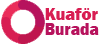
<style>
.page{position:relative;width:100px;height:44px;background:#ffffff}
.page>*{position:absolute;margin:0}
.t1{font:16.7px "FranklinGothic-Heavy";color:#d81d52}
.t2{font:16.7px "FranklinGothic-Heavy";color:#b7135d;scale:0.96 1}
</style>
<div class="page">
<p class="t1" style="left:45px;top:8px;width:53px;height:12px">Kuaför</p>
<p class="t2" style="left:45px;top:23px;width:54px;height:12px">Burada</p>
</div>
